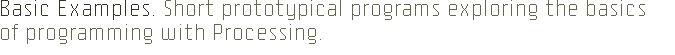
<style>
.page{position:relative;width:675px;height:55px;background:#ffffff}
.page>*{position:absolute;margin:0}
.t1{font:20px "Pro55ing-Alternate";color:#66664c}
.t2{font:20px "Pro55ing-Alternate";color:#333323}
</style>
<div class="page">
<p class="t1" style="left:1px;top:0px;width:644px;height:44px"><span class="t2">Basic Examples. </span>Short prototypical programs exploring the basics <br>of programming with Processing.</p>
</div>
